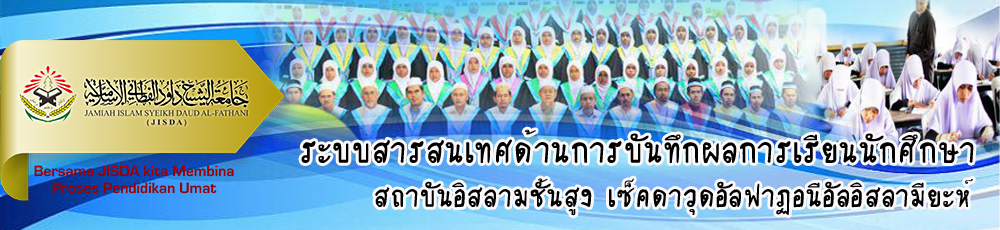
<style>
.page{position:relative;width:1000px;height:230px}
.page>*{position:absolute;margin:0}
.t1{font:46.8px "Thelazykiller";color:#000000}
.t2{font:40px "Thelazykiller";color:#000000}
</style>
<div class="page">
<p class="t1" style="left:301px;top:129px;width:673px;height:34px">ระบบสารสนเทศด้านการบันทึกผลการเรียนนักศึกษา</p>
<p class="t2" style="left:375px;top:178px;width:598px;height:38px">สถาบันอิสลามชั้นสูง เซ็คดาวุดอัลฟาฏอนีอัลอิสลามียะห์</p>
</div>
